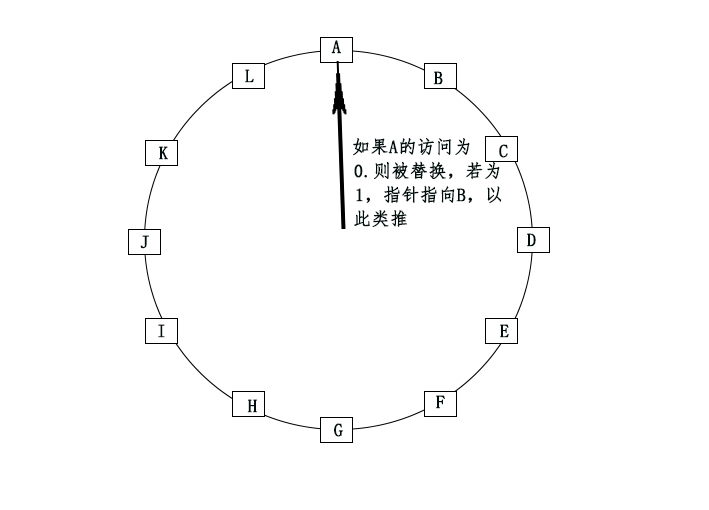
<style>
.page{position:relative;width:709px;height:510px;background:#ffffff}
.page>*{position:absolute;margin:0}
.t1{font:18px "FangSong";color:#010e0e;font-weight:bold}
</style>
<div class="page">
<p class="t1" style="left:331px;top:40px;width:10px;height:14px">A</p>
<p class="t1" style="left:245px;top:69px;width:9px;height:14px">L</p>
<p class="t1" style="left:433px;top:71px;width:10px;height:14px">B</p>
<p class="t1" style="left:353px;top:137px;width:117px;height:19px">如果A的访问为</p>
<p class="t1" style="left:159px;top:146px;width:9px;height:14px">K</p>
<p class="t1" style="left:499px;top:144px;width:9px;height:14px">C</p>
<p class="t1" style="left:354px;top:161px;width:146px;height:19px">0.则被替换，若为</p>
<p class="t1" style="left:356px;top:185px;width:146px;height:19px">1，指针指向B，以</p>
<p class="t1" style="left:354px;top:210px;width:53px;height:17px">此类推</p>
<p class="t1" style="left:527px;top:233px;width:9px;height:14px">D</p>
<p class="t1" style="left:140px;top:235px;width:9px;height:14px">J</p>
<p class="t1" style="left:158px;top:324px;width:7px;height:14px">I</p>
<p class="t1" style="left:500px;top:324px;width:9px;height:14px">E</p>
<p class="t1" style="left:247px;top:399px;width:10px;height:14px">H</p>
<p class="t1" style="left:436px;top:395px;width:9px;height:14px">F</p>
<p class="t1" style="left:334px;top:423px;width:9px;height:14px">G</p>
</div>
